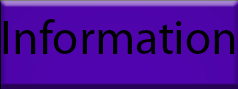
<style>
.page{position:relative;width:238px;height:89px}
.page>*{position:absolute;margin:0}
.t1{font:48px "MyriadPro-Regular";color:#000000}
</style>
<div class="page">
<p class="t1" style="left:3px;top:19px;width:232px;height:35px">Information</p>
</div>
